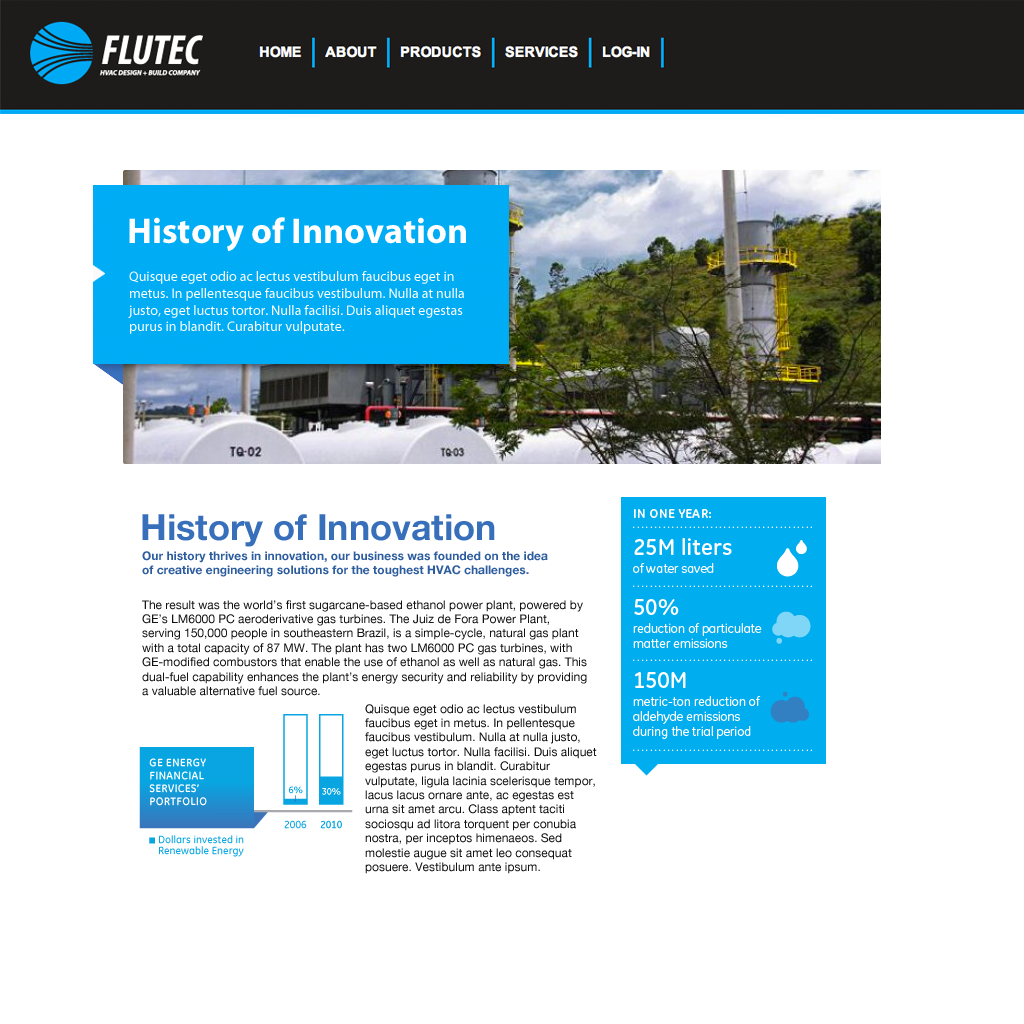
<style>
.page{position:relative;width:1024px;height:1024px;background:#ffffff}
.page>*{position:absolute;margin:0}
.t1{font:36px "MyriadPro-Bold";color:#ffffff}
.t2{font:14px "MyriadPro-Regular";color:#ffffff}
.t3{font:36px "HelveticaNeue-Bold";color:#376fba}
.t4{font:12px "HelveticaNeue-Bold";color:#2e5d9f}
.t5{font:12px "HelveticaNeue";color:#131313}
</style>
<div class="page">
<p class="t1" style="left:129px;top:217px;width:337px;height:34px">History of Innovation</p>
<p class="t2" style="left:128px;top:271px;width:336px;height:63px">Quisque eget odio ac lectus vestibulum faucibus eget in metus. In pellentesque faucibus vestibulum. Nulla at nulla justo, eget luctus tortor. Nulla facilisi. Duis aliquet egestas purus in blandit. Curabitur vulputate.</p>
<p class="t3" style="left:142px;top:514px;width:353px;height:33px">History of Innovation</p>
<p class="t4" style="left:142px;top:551px;width:406px;height:26px">Our history thrives in innovation, our business was founded on the idea of creative engineering solutions for the toughest HVAC challenges.</p>
<p class="t5" style="left:142px;top:600px;width:445px;height:96px">The result was the world’s first sugarcane-based ethanol power plant, powered by GE’s LM6000 PC aeroderivative gas turbines. The Juiz de Fora Power Plant, serving 150,000 people in southeastern Brazil, is a simple-cycle, natural gas plant with a total capacity of 87 MW. The plant has two LM6000 PC gas turbines, with GE-modified combustors that enable the use of ethanol as well as natural gas. This dual-fuel capability enhances the plant’s energy security and reliability by providing a valuable alternative fuel source.</p>
<p class="t5" style="left:365px;top:704px;width:232px;height:170px">Quisque eget odio ac lectus vestibulum faucibus eget in metus. In pellentesque faucibus vestibulum. Nulla at nulla justo, eget luctus tortor. Nulla facilisi. Duis aliquet egestas purus in blandit. Curabitur vulputate, ligula lacinia scelerisque tempor, lacus lacus ornare ante, ac egestas est urna sit amet arcu. Class aptent taciti sociosqu ad litora torquent per conubia nostra, per inceptos himenaeos. Sed molestie augue sit amet leo consequat posuere. Vestibulum ante ipsum.</p>
</div>
